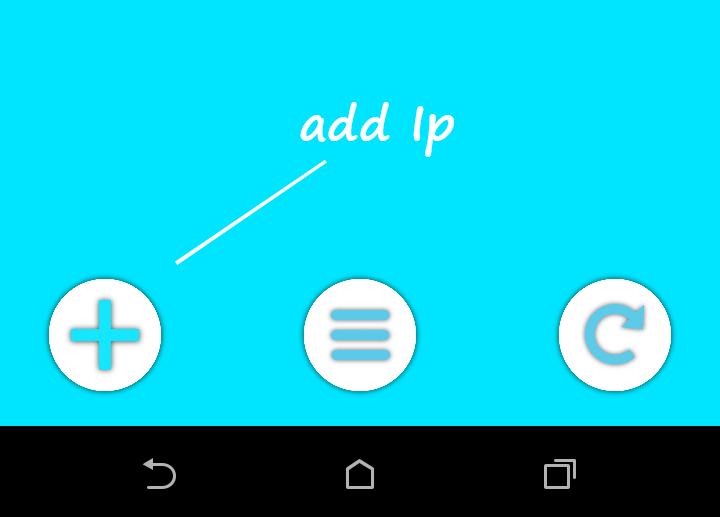
<style>
.page{position:relative;width:720px;height:517px;background:#00e5ff}
.page>*{position:absolute;margin:0}
.t1{font:48px "SegoePrint-Bold";color:#ffffff}
</style>
<div class="page">
<p class="t1" style="left:300px;top:102px;width:154px;height:55px">add Ip</p>
</div>
